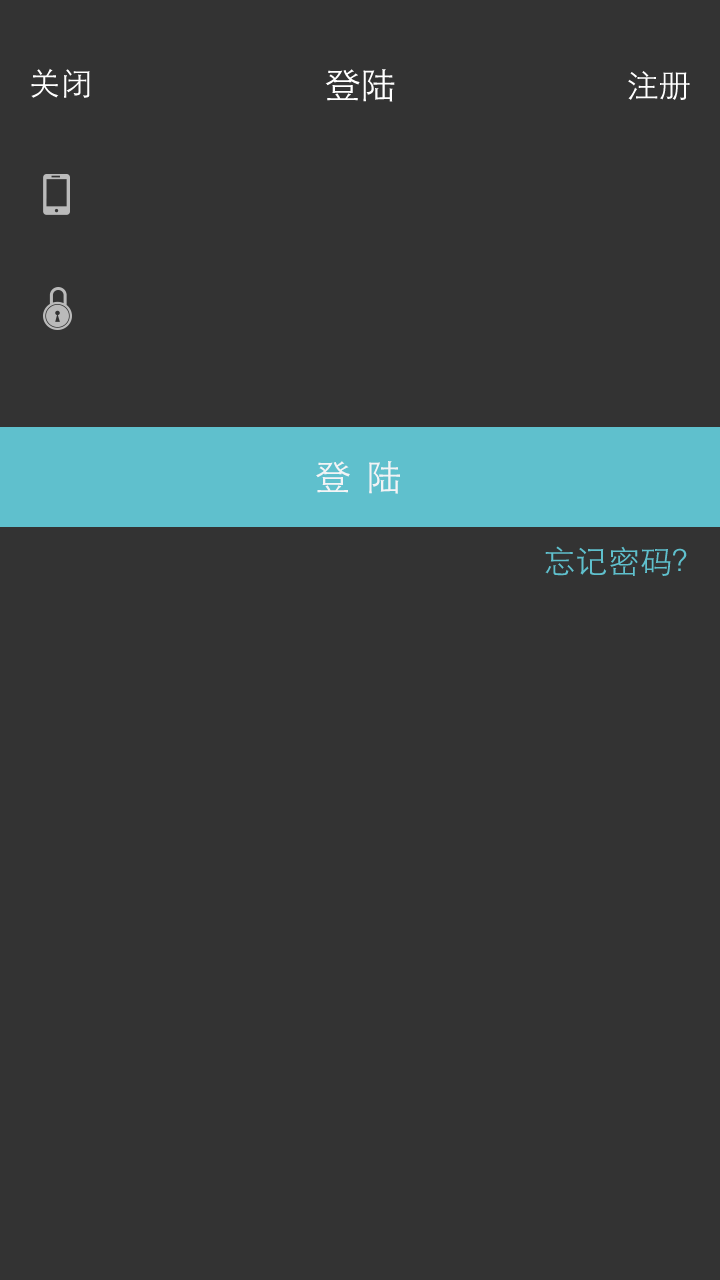
<style>
.page{position:relative;width:720px;height:1280px;background:#333333}
.page>*{position:absolute;margin:0}
.t1{font:32px "STHeitiSC-Light";color:#ffffff}
.t2{font:36px "STHeitiSC-Light";color:#ffffff}
.t3{font:36px "STHeitiSC-Light";letter-spacing:-0.08em;color:#f3f4f6}
.t4{font:32px "STHeitiSC-Light";color:#5fc0cd}
</style>
<div class="page">
<p class="t1" style="left:31px;top:68px;width:59px;height:30px">关闭</p>
<p class="t2" style="left:325px;top:69px;width:70px;height:33px">登陆</p>
<p class="t1" style="left:628px;top:71px;width:62px;height:29px">注册</p>
<p class="t3" style="left:316px;top:461px;width:84px;height:33px">登   陆</p>
<p class="t4" style="left:545px;top:546px;width:142px;height:30px">忘记密码？</p>
</div>
